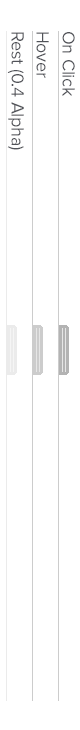
<style>
.page{position:relative;width:80px;height:730px;background:#ffffff}
.page>*{position:absolute;margin:0}
.t1{font:18px "ProximaNova-Regular";letter-spacing:-0.01em;color:#515359}
</style>
<div class="page">
<p class="t1" style="left:7px;top:32px;width:17px;height:118px;rotate:90deg">Rest (0.4 Alpha)</p>
<p class="t1" style="left:36px;top:32px;width:13px;height:46px;rotate:90deg">Hover</p>
<p class="t1" style="left:62px;top:32px;width:13px;height:64px;rotate:90deg">On Click</p>
</div>
